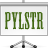
<style>
.page{position:relative;width:48px;height:48px;background:#ffffff}
.page>*{position:absolute;margin:0}
.t1{font:22.5px "MesquiteStd";letter-spacing:0.03em;color:#446915}
</style>
<div class="page">
<p class="t1" style="left:5px;top:12px;width:39px;height:18px">PYlstr</p>
</div>
